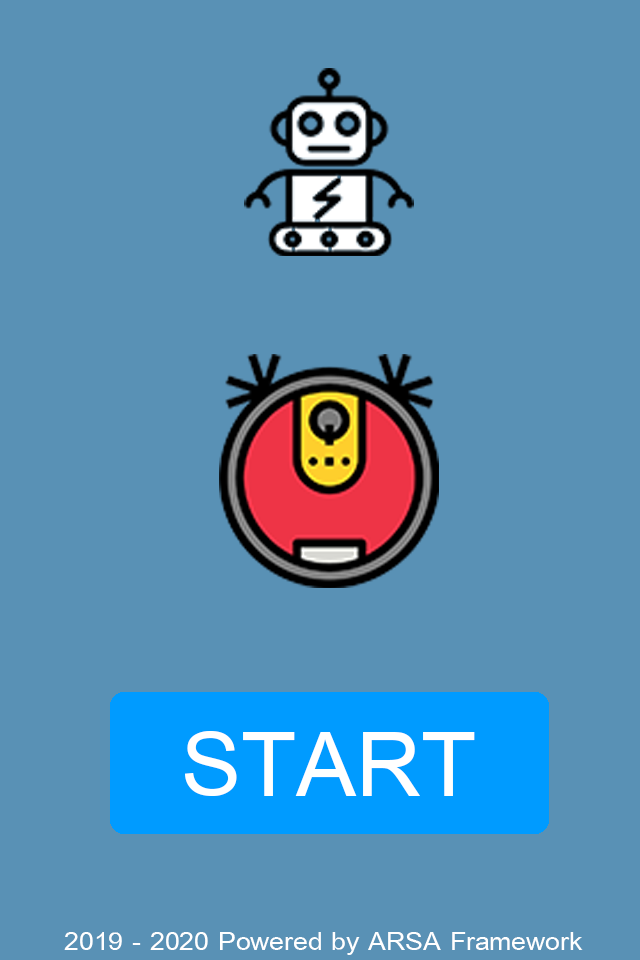
<style>
.page{position:relative;width:640px;height:960px;background:#5991b5}
.page>*{position:absolute;margin:0}
.t1{font:37.6px "BrowalliaNew";color:#ffffff;scale:1.08 1}
</style>
<div class="page">
<p class="t1" style="left:64px;top:932px;width:519px;height:23px">2019 - 2020 Powered by ARSA Framework</p>
</div>
